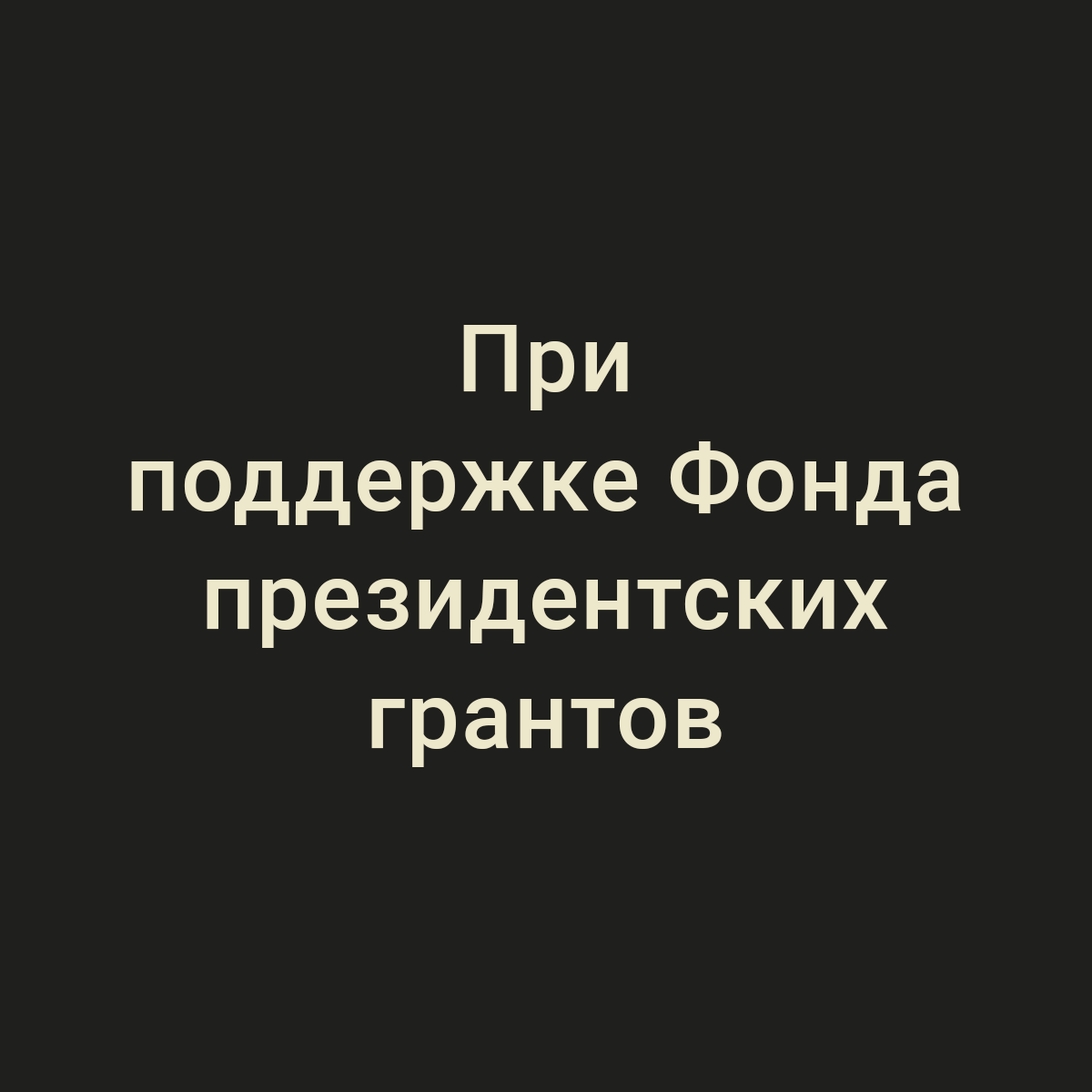
<style>
.page{position:relative;width:1092px;height:1092px;background:#1f1f1d}
.page>*{position:absolute;margin:0}
.t1{font:93.4px "Roboto-Medium";letter-spacing:0.02em;color:#ede7cb}
</style>
<div class="page">
<p class="t1" style="left:131px;top:325px;width:830px;height:442px;text-align:center">При<br>поддержке Фонда<br>президентских<br>грантов</p>
</div>
